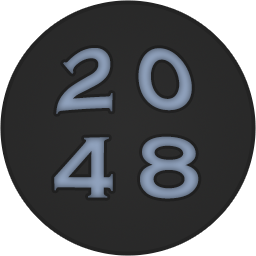
<style>
.page{position:relative;width:256px;height:256px;background:#ffffff}
.page>*{position:absolute;margin:0}
.t1{font:72px/72px "CopperplateGothic-Bold";color:#8090a8}
</style>
<div class="page">
<p class="t1" style="left:54px;top:48px;width:145px;height:151px;text-align:center">2 0<br>4 8</p>
</div>
